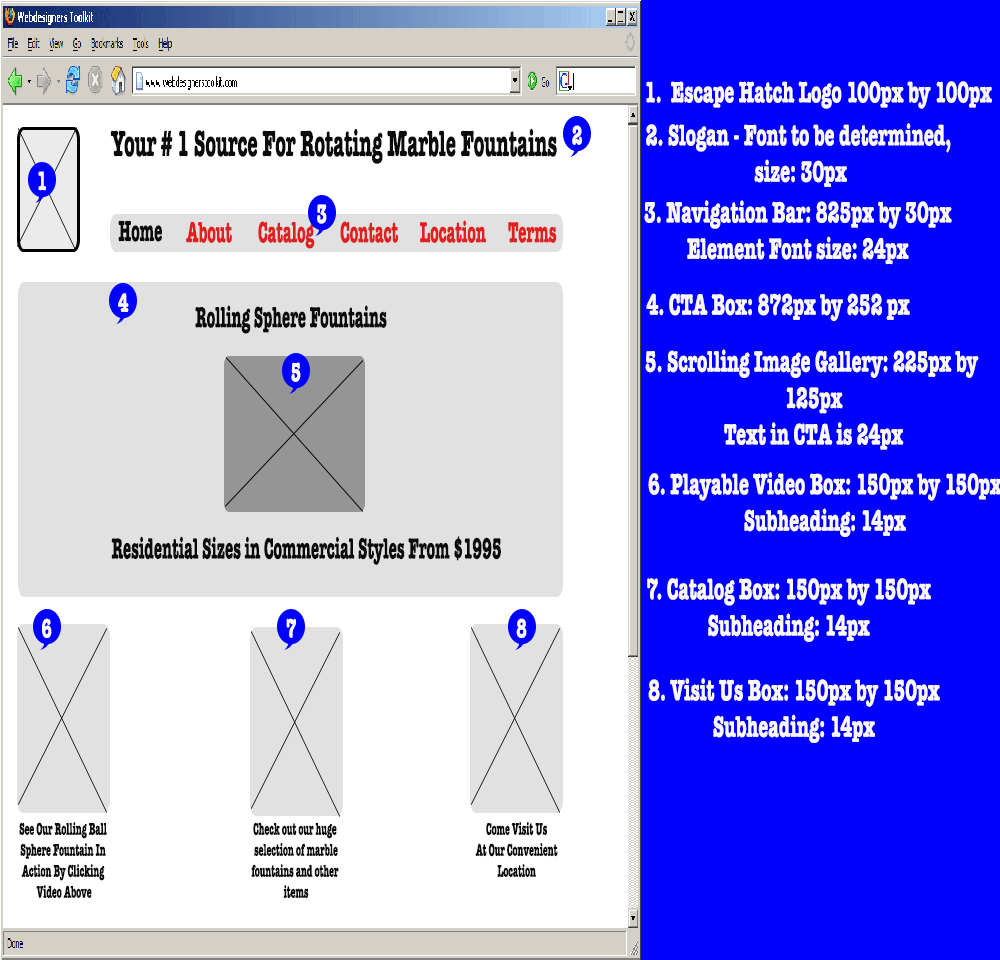
<style>
.page{position:relative;width:1000px;height:960px;background:#0000ff}
.page>*{position:absolute;margin:0}
.t1{font:30.3px "AmericanTypewriter-Bold";color:#fef9f9;scale:0.6 1}
.t2{font:27.3px "AmericanTypewriter-Bold";color:#fef9f9;scale:0.58 1}
.t3{font:37.5px "AmericanTypewriter-Bold";color:#0c0b0b;scale:0.5 1}
.t4{font:30px "AmericanTypewriter-Bold";color:#0c0b0b;scale:0.5 1}
.t5{font:30px "AmericanTypewriter-Bold";color:#e02121;scale:0.5 1}
.t6{font:17.5px "AmericanTypewriter-Bold";color:#0c0b0b;scale:0.5 1}
</style>
<div class="page">
<p class="t1" style="left:646px;top:81px;width:346px;height:28px">1.  Escape Hatch Logo 100px by 100px</p>
<p class="t2" style="left:572px;top:125px;width:10px;height:20px">2</p>
<p class="t1" style="left:646px;top:123px;width:305px;height:64px;text-align:center">2. Slogan - Font to be determined, <br>size: 30px</p>
<p class="t3" style="left:110px;top:128px;width:447px;height:36px">Your # 1 Source For Rotating Marble Fountains</p>
<p class="t2" style="left:38px;top:171px;width:8px;height:20px">1</p>
<p class="t2" style="left:317px;top:204px;width:10px;height:20px">3</p>
<p class="t1" style="left:644px;top:200px;width:308px;height:65px;text-align:center">3. Navigation Bar: 825px by 30px<br>Element Font size: 24px</p>
<p class="t4" style="left:118px;top:220px;width:44px;height:22px">Home</p>
<p class="t5" style="left:186px;top:221px;width:46px;height:22px">About</p>
<p class="t5" style="left:258px;top:221px;width:57px;height:28px">Catalog</p>
<p class="t5" style="left:340px;top:221px;width:58px;height:22px">Contact</p>
<p class="t5" style="left:420px;top:220px;width:66px;height:23px">Location</p>
<p class="t5" style="left:508px;top:222px;width:49px;height:21px">Terms</p>
<p class="t2" style="left:118px;top:293px;width:11px;height:19px">4</p>
<p class="t1" style="left:646px;top:293px;width:264px;height:29px">4. CTA Box: 872px by 252 px</p>
<p class="t4" style="left:195px;top:305px;width:192px;height:29px">Rolling Sphere Fountains</p>
<p class="t1" style="left:645px;top:349px;width:334px;height:101px;text-align:center">5. Scrolling Image Gallery: 225px by <br>125px<br>Text in CTA is 24px</p>
<p class="t2" style="left:291px;top:362px;width:10px;height:20px">5</p>
<p class="t1" style="left:648px;top:472px;width:354px;height:65px;text-align:center">6. Playable Video Box: 150px by 150px<br>Subheading: 14px</p>
<p class="t4" style="left:111px;top:536px;width:390px;height:29px">Residential Sizes in Commercial Styles From $1995</p>
<p class="t1" style="left:647px;top:578px;width:284px;height:64px;text-align:center">7. Catalog Box: 150px by 150px<br>Subheading: 14px</p>
<p class="t2" style="left:42px;top:618px;width:10px;height:20px">6</p>
<p class="t2" style="left:286px;top:618px;width:10px;height:20px">7</p>
<p class="t2" style="left:516px;top:618px;width:11px;height:20px">8</p>
<p class="t1" style="left:648px;top:678px;width:292px;height:65px;text-align:center">8. Visit Us Box: 150px by 150px<br>Subheading: 14px</p>
<p class="t6" style="left:19px;top:822px;width:88px;height:77px;text-align:center">See Our Rolling Ball <br>Sphere Fountain In <br>Action By Clicking <br>Video Above</p>
<p class="t6" style="left:251px;top:822px;width:88px;height:77px;text-align:center">Check out our huge <br>selection of marble<br>fountains and other <br>items</p>
<p class="t6" style="left:475px;top:822px;width:83px;height:56px;text-align:center">Come Visit Us<br>At Our Convenient<br>Location</p>
</div>
